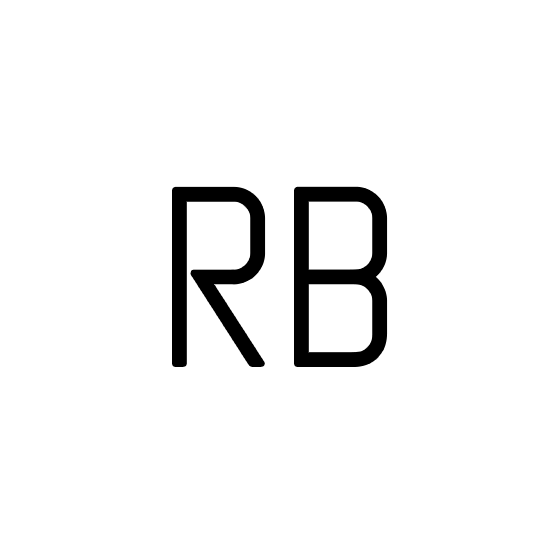
<style>
.page{position:relative;width:549px;height:549px;background:#ffffff}
.page>*{position:absolute;margin:0}
.t1{font:250px "Vanadine-Bold";color:#000000}
</style>
<div class="page">
<p class="t1" style="left:175px;top:189px;width:210px;height:175px">RB</p>
</div>
